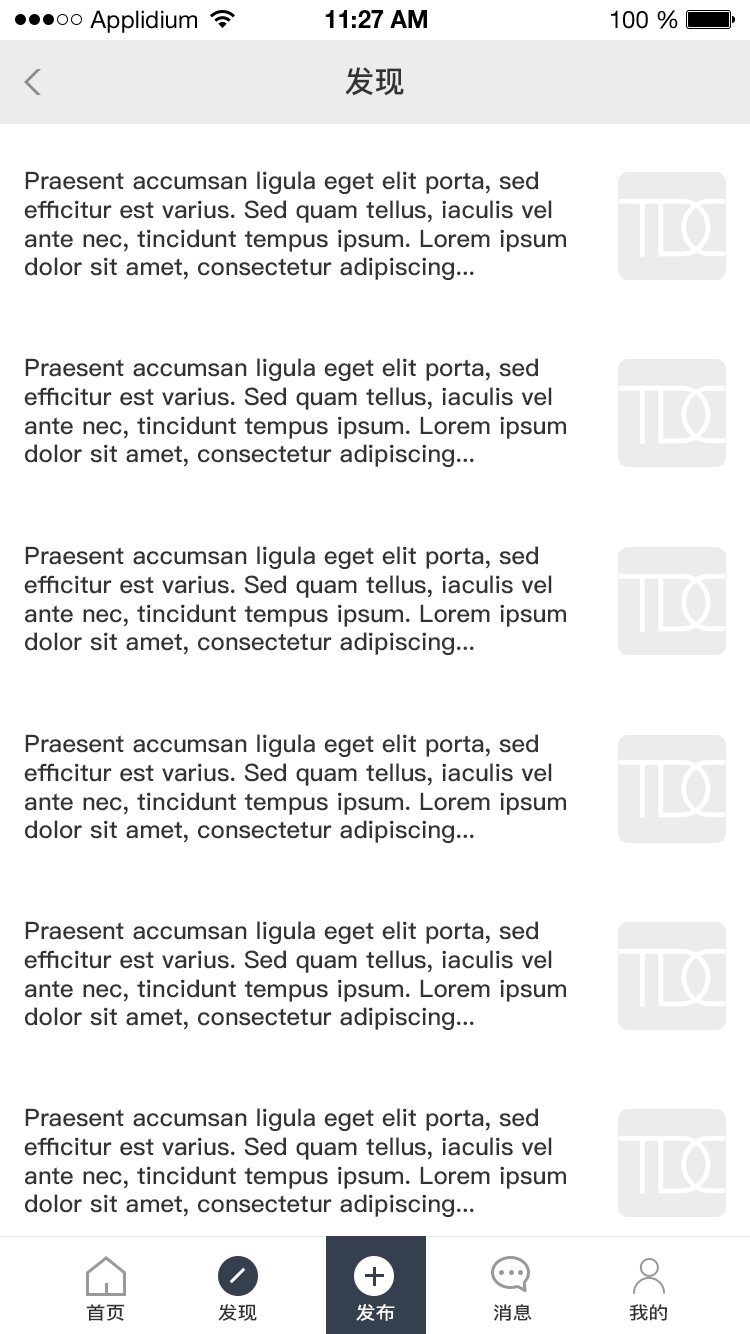
<style>
.page{position:relative;width:750px;height:1334px;background:#ffffff}
.page>*{position:absolute;margin:0}
.t1{font:24px "HelveticaNeueLTStd-Roman";color:#000000}
.t2{font:24px "HelveticaNeueLTStd-Bd";color:#000000}
.t3{font:30px "PingFang-SC-Bold";color:#333333}
.t4{font:24px "PingFang-SC-Bold";color:#333333}
.t5{font:18px "PingFang-SC-Bold";color:#333333;scale:1.1 1}
.t6{font:18px "PingFang-SC-Bold";color:#ffffff;scale:1.1 1}
</style>
<div class="page">
<p class="t1" style="left:90px;top:10px;width:107px;height:23px">Applidium</p>
<p class="t2" style="left:325px;top:10px;width:102px;height:18px">11:27 AM</p>
<p class="t1" style="left:611px;top:10px;width:67px;height:19px">100 %</p>
<p class="t3" style="left:345px;top:67px;width:59px;height:29px">发现</p>
<p class="t4" style="left:24px;top:171px;width:542px;height:109px">Praesent accumsan ligula eget elit porta, sed <br>efficitur est varius. Sed quam tellus, iaculis vel<br>ante nec, tincidunt tempus ipsum. Lorem ipsum <br>dolor sit amet, consectetur adipiscing...</p>
<p class="t4" style="left:24px;top:358px;width:542px;height:109px">Praesent accumsan ligula eget elit porta, sed <br>efficitur est varius. Sed quam tellus, iaculis vel<br>ante nec, tincidunt tempus ipsum. Lorem ipsum <br>dolor sit amet, consectetur adipiscing...</p>
<p class="t4" style="left:24px;top:546px;width:542px;height:109px">Praesent accumsan ligula eget elit porta, sed <br>efficitur est varius. Sed quam tellus, iaculis vel<br>ante nec, tincidunt tempus ipsum. Lorem ipsum <br>dolor sit amet, consectetur adipiscing...</p>
<p class="t4" style="left:24px;top:734px;width:542px;height:109px">Praesent accumsan ligula eget elit porta, sed <br>efficitur est varius. Sed quam tellus, iaculis vel<br>ante nec, tincidunt tempus ipsum. Lorem ipsum <br>dolor sit amet, consectetur adipiscing...</p>
<p class="t4" style="left:24px;top:921px;width:542px;height:109px">Praesent accumsan ligula eget elit porta, sed <br>efficitur est varius. Sed quam tellus, iaculis vel<br>ante nec, tincidunt tempus ipsum. Lorem ipsum <br>dolor sit amet, consectetur adipiscing...</p>
<p class="t4" style="left:24px;top:1108px;width:542px;height:109px">Praesent accumsan ligula eget elit porta, sed <br>efficitur est varius. Sed quam tellus, iaculis vel<br>ante nec, tincidunt tempus ipsum. Lorem ipsum <br>dolor sit amet, consectetur adipiscing...</p>
<p class="t5" style="left:86px;top:1304px;width:39px;height:17px">首页</p>
<p class="t5" style="left:218px;top:1304px;width:39px;height:17px">发现</p>
<p class="t6" style="left:356px;top:1304px;width:39px;height:17px">发布</p>
<p class="t5" style="left:493px;top:1304px;width:39px;height:17px">消息</p>
<p class="t5" style="left:629px;top:1304px;width:38px;height:17px">我的</p>
</div>
